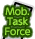
<style>
.page{position:relative;width:35px;height:39px;background:#234f00}
.page>*{position:absolute;margin:0}
.t1{font:9px/10px "UDShinGoPro-Light";color:#98e241;font-weight:bold}
</style>
<div class="page">
<p class="t1" style="left:5px;top:7px;width:26px;height:29px;text-align:center">Mob.<br>Task<br>Force</p>
</div>
